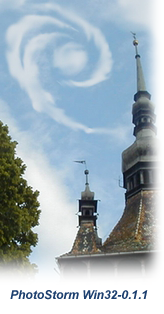
<style>
.page{position:relative;width:164px;height:314px}
.page>*{position:absolute;margin:0}
.t1{font:12px "Arial-BoldItalicMT";color:#1e406f}
</style>
<div class="page">
<p class="t1" style="left:10px;top:290px;width:138px;height:10px">PhotoStorm Win32-0.1.1</p>
</div>
